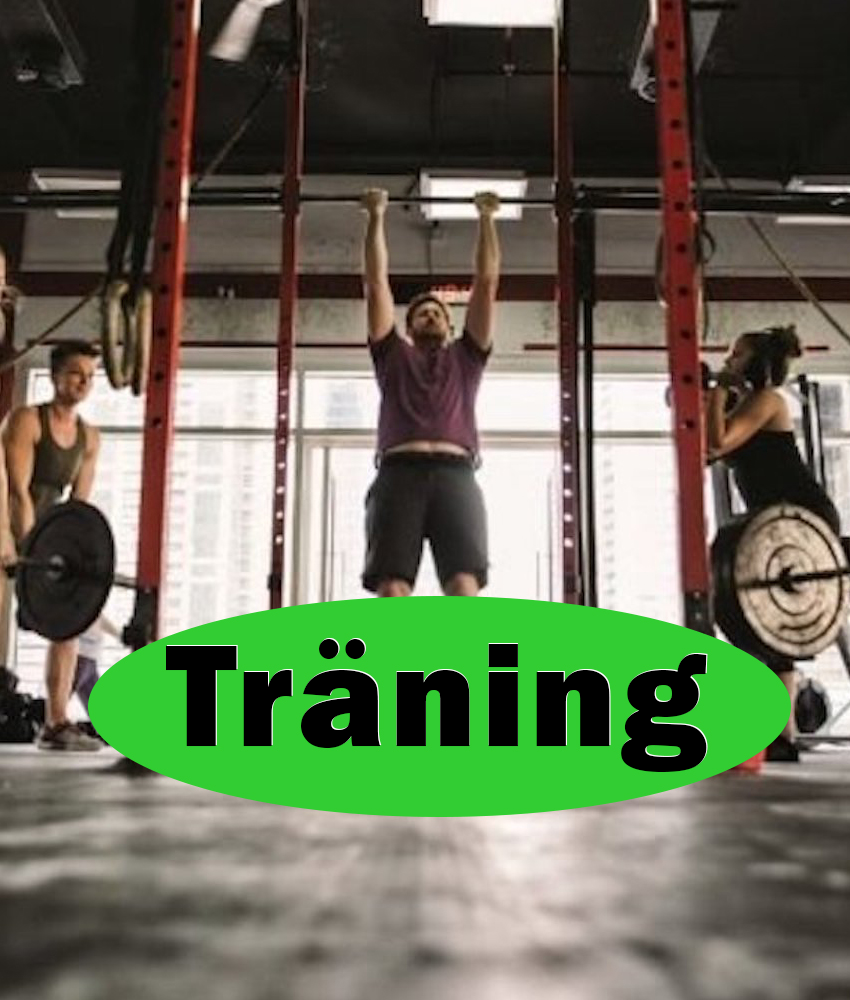
<style>
.page{position:relative;width:850px;height:1000px}
.page>*{position:absolute;margin:0}
.t1{font:150px "FranklinGothic-Heavy";letter-spacing:0.025em;color:#000000}
</style>
<div class="page">
<p class="t1" style="left:166px;top:639px;width:541px;height:133px">Träning</p>
</div>
